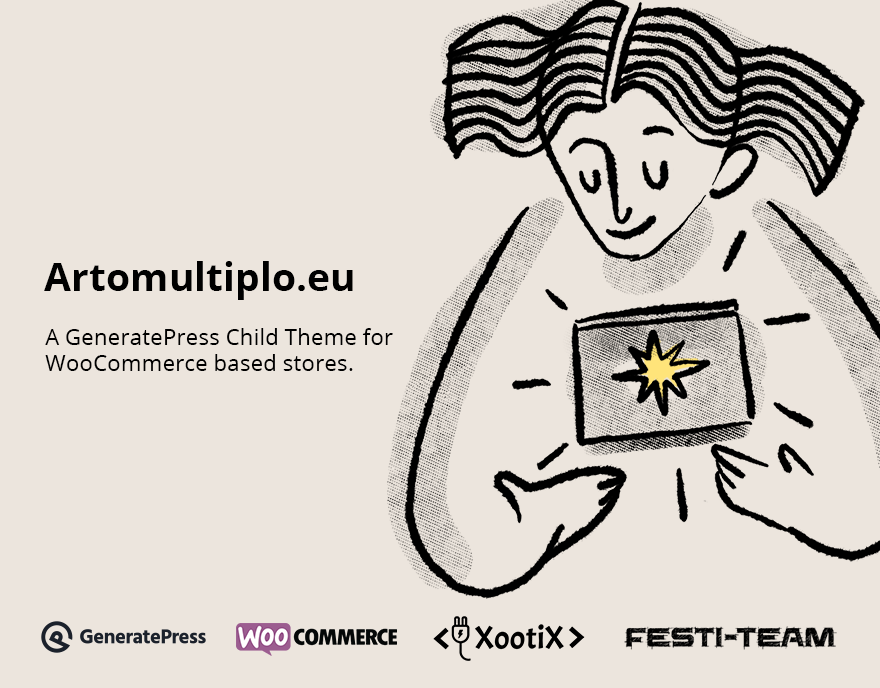
<style>
.page{position:relative;width:880px;height:688px;background:#ece5dd}
.page>*{position:absolute;margin:0}
.t1{font:39.1px "OpenSans-Bold";color:#000000}
.t2{font:22.2px "OpenSans";color:#000000}
</style>
<div class="page">
<p class="t1" style="left:44px;top:261px;width:309px;height:39px">Artomultiplo.eu</p>
<p class="t2" style="left:45px;top:328px;width:348px;height:43px">A GeneratePress Child Theme for WooCommerce based stores.</p>
</div>
